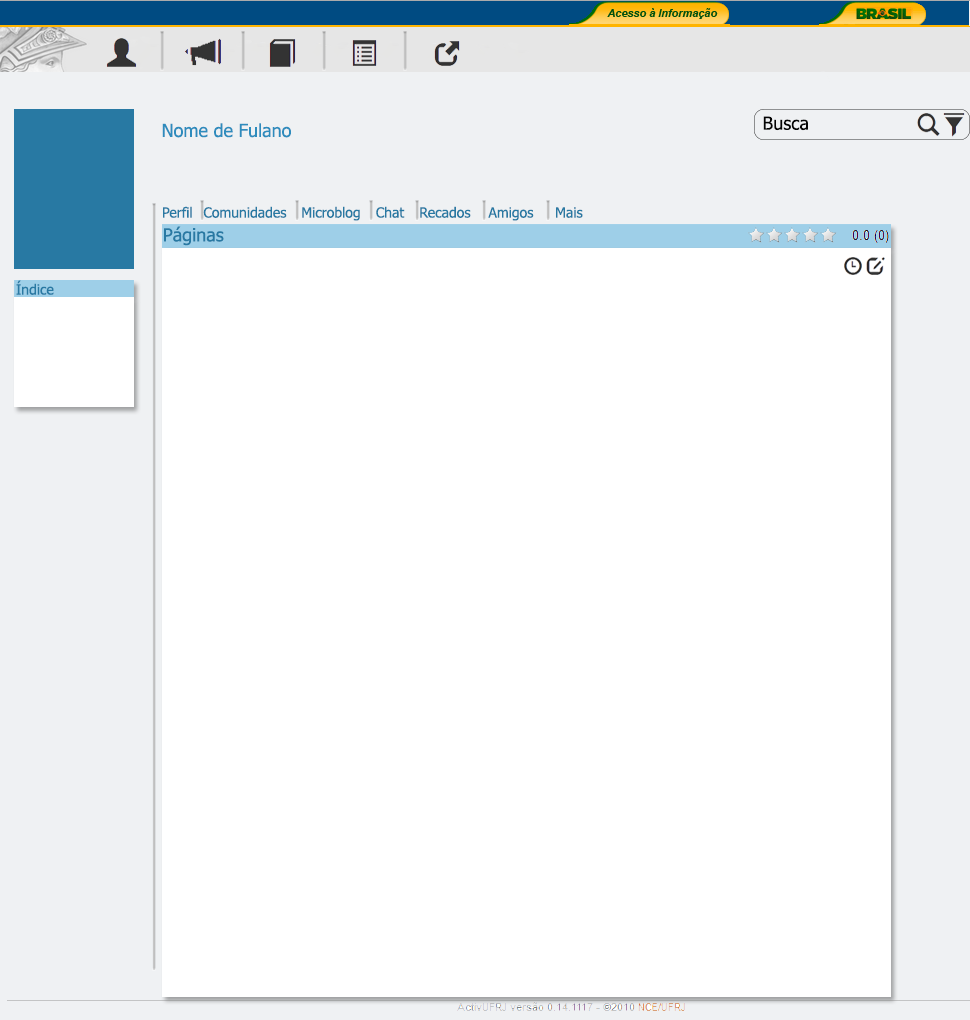
<style>
.page{position:relative;width:970px;height:1020px;background:#ffffff}
.page>*{position:absolute;margin:0}
.t1{font:18px "Tahoma";color:#2e8cbd}
.t2{font:18px "Tahoma";color:#040404}
.t3{font:14px "Tahoma";color:#2879a3}
.t4{font:18px "Tahoma";color:#2879a3}
</style>
<div class="page">
<p class="t1" style="left:162px;top:123px;width:129px;height:15px">Nome de Fulano</p>
<p class="t2" style="left:763px;top:116px;width:45px;height:15px">Busca</p>
<p class="t3" style="left:163px;top:206px;width:29px;height:12px">Perfil</p>
<p class="t3" style="left:203px;top:206px;width:84px;height:12px">Comunidades</p>
<p class="t3" style="left:302px;top:206px;width:58px;height:15px">Microblog</p>
<p class="t3" style="left:376px;top:206px;width:29px;height:12px">Chat</p>
<p class="t3" style="left:420px;top:206px;width:51px;height:12px">Recados</p>
<p class="t3" style="left:488px;top:207px;width:46px;height:14px">Amigos</p>
<p class="t3" style="left:556px;top:207px;width:27px;height:11px">Mais</p>
<p class="t4" style="left:164px;top:226px;width:60px;height:20px">Páginas</p>
<p class="t3" style="left:16px;top:280px;width:38px;height:15px">Índice</p>
</div>
